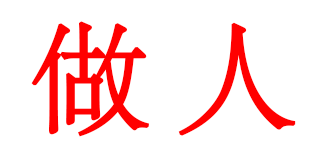
<style>
.page{position:relative;width:320px;height:160px;background:#ffffff}
.page>*{position:absolute;margin:0}
.t1{font:120px "AdobeSongStd-Light";letter-spacing:0.2em;color:#ff0000;font-weight:bold}
</style>
<div class="page">
<p class="t1" style="left:31px;top:21px;width:265px;height:116px">做人</p>
</div>
